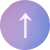
<style>
.page{position:relative;width:50px;height:50px}
.page>*{position:absolute;margin:0}
.t1{font:36px "NanumSquareEB";letter-spacing:0.05em;color:#fff0ff}
</style>
<div class="page">
<p class="t1" style="left:19px;top:12px;width:13px;height:26px">↑</p>
</div>
